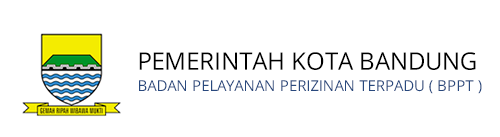
<style>
.page{position:relative;width:500px;height:137px;background:#ffffff}
.page>*{position:absolute;margin:0}
.t1{font:24.3px "OpenSans";color:#000000}
.t2{font:14.9px "OpenSans";color:#29497f}
</style>
<div class="page">
<p class="t1" style="left:139px;top:52px;width:337px;height:18px">PEMERINTAH KOTA BANDUNG</p>
<p class="t2" style="left:139px;top:80px;width:343px;height:14px">BADAN PELAYANAN PERIZINAN TERPADU ( BPPT )</p>
</div>
